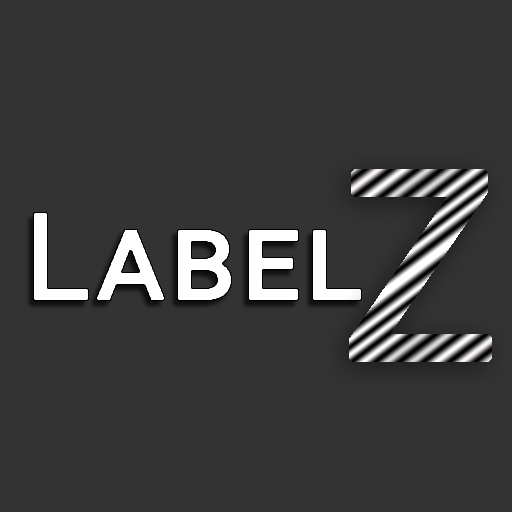
<style>
.page{position:relative;width:512px;height:512px;background:#333333}
.page>*{position:absolute;margin:0}
.t1{font:260px "Roboto-Regular";letter-spacing:0.025em;font-variant:small-caps;font-weight:bold}
.t2{font:120px "Roboto-Regular";letter-spacing:0.025em;color:#ffffff;font-variant:small-caps;font-weight:bold}
</style>
<div class="page">
<p class="t1" style="left:349px;top:169px;width:143px;height:193px">Z</p>
<p class="t2" style="left:33px;top:212px;width:329px;height:89px">Label</p>
</div>
